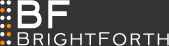
<style>
.page{position:relative;width:169px;height:46px;background:#333333}
.page>*{position:absolute;margin:0}
.t1{font:55px "AvianoSans";color:#ffffff;font-weight:bold;scale:0.76 1}
.t2{font:23px "AvianoSansLight";letter-spacing:0.1em;color:#ffffff;font-weight:bold;scale:0.76 1}
</style>
<div class="page">
<p class="t1" style="left:17px;top:0px;width:53px;height:29px">bf</p>
<p class="t2" style="left:17px;top:32px;width:152px;height:14px">BrightForth</p>
</div>
